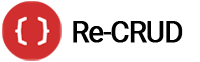
<style>
.page{position:relative;width:200px;height:62px;background:#ffffff}
.page>*{position:absolute;margin:0}
.t1{font:29px "Roboto-Regular";letter-spacing:-0.05em;color:#010101;font-weight:bold}
</style>
<div class="page">
<p class="t1" style="left:73px;top:21px;width:110px;height:22px">Re-CRUD</p>
</div>
